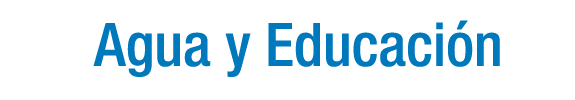
<style>
.page{position:relative;width:575px;height:100px;background:#ffffff}
.page>*{position:absolute;margin:0}
.t1{font:60px "HelveticaNeueLTStd-MdCn";color:#0078bc}
</style>
<div class="page">
<p class="t1" style="left:93px;top:20px;width:407px;height:57px">Agua y Educación</p>
</div>
